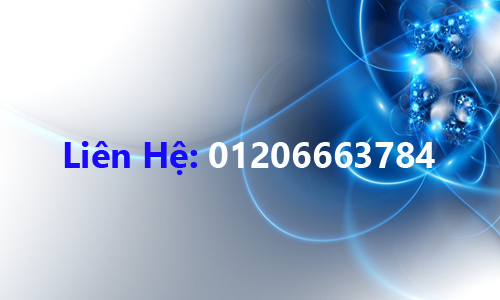
<style>
.page{position:relative;width:500px;height:300px}
.page>*{position:absolute;margin:0}
.t1{font:36px "LeelawadeeUI-Bold";color:#fcfdfd}
.t2{font:36px "LeelawadeeUI-Bold";color:#1a09fd}
</style>
<div class="page">
<p class="t1" style="left:64px;top:141px;width:371px;height:34px"><span class="t2">Liên Hệ: </span>01206663784</p>
</div>
